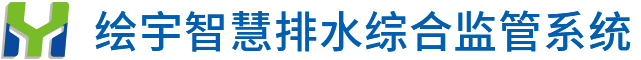
<style>
.page{position:relative;width:641px;height:60px;background:#ffffff}
.page>*{position:absolute;margin:0}
.t1{font:44px "SourceHanSansCN-Medium";letter-spacing:0.02em;color:#005eae}
</style>
<div class="page">
<p class="t1" style="left:95px;top:10px;width:536px;height:42px">绘宇智慧排水综合监管系统</p>
</div>
